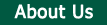
<style>
.page{position:relative;width:107px;height:25px;background:#005941}
.page>*{position:absolute;margin:0}
.t1{font:18px "Tahoma";letter-spacing:0.02em;color:#ffffff;font-weight:bold}
</style>
<div class="page">
<p class="t1" style="left:14px;top:4px;width:79px;height:15px">About Us</p>
</div>
